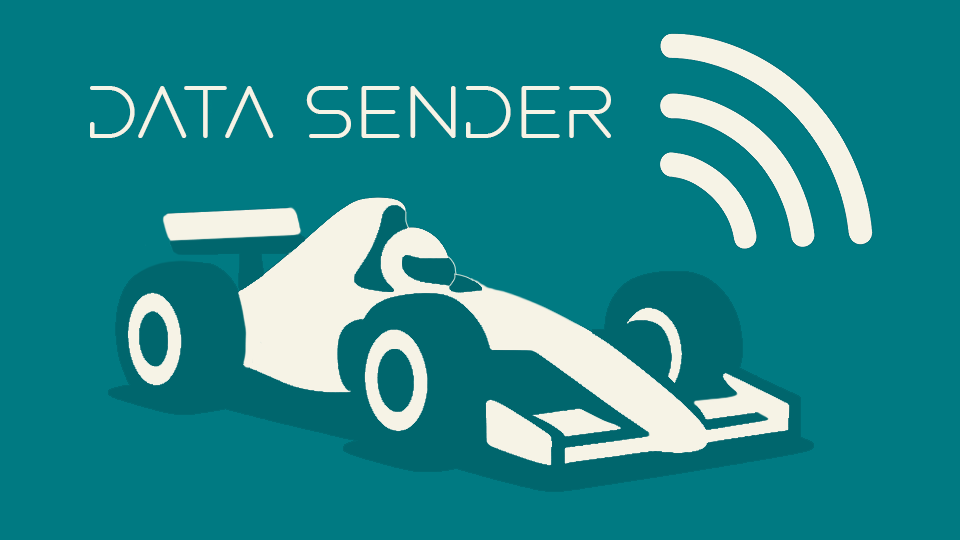
<style>
.page{position:relative;width:960px;height:540px;background:#007a82}
.page>*{position:absolute;margin:0}
.t1{font:74.1px "AlteredCarbonV2";color:#f6f3e6}
</style>
<div class="page">
<p class="t1" style="left:90px;top:86px;width:521px;height:52px">Data Sender</p>
</div>
